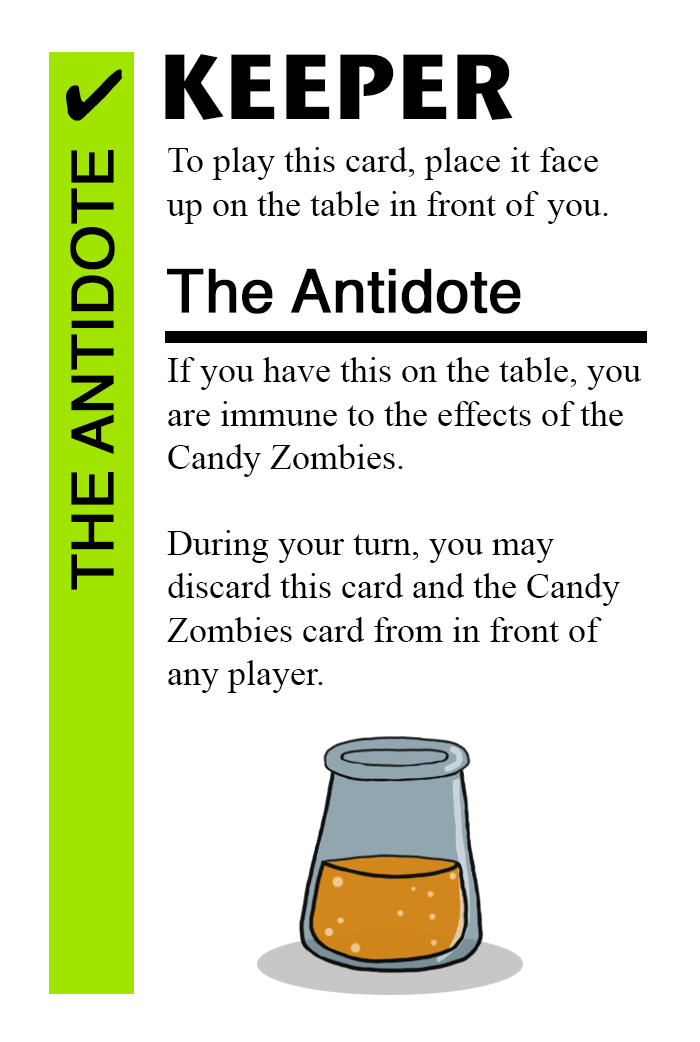
<style>
.page{position:relative;width:700px;height:1042px;background:#ffffff}
.page>*{position:absolute;margin:0}
.t1{font:92px "StoneSansITC-Bold";color:#000000}
.t2{font:72px "MS-Gothic";color:#000000}
.t3{font:58px "Helvetica";color:#000000;font-weight:bold}
.t4{font:36px "TimesNewRomanPSMT";color:#000000}
.t5{font:60px "Helvetica";color:#000000;font-weight:bold}
</style>
<div class="page">
<p class="t1" style="left:165px;top:54px;width:348px;height:66px">KEEPER</p>
<p class="t2" style="left:66px;top:69px;width:56px;height:52px">✔</p>
<p class="t3" style="left:70px;top:150px;width:45px;height:440px;rotate:-90deg">THE ANTIDOTE</p>
<p class="t4" style="left:167px;top:147px;width:441px;height:77px">To play this card, place it face<br>up on the table in front of you.</p>
<p class="t5" style="left:167px;top:268px;width:354px;height:46px">The Antidote</p>
<p class="t4" style="left:167px;top:357px;width:474px;height:336px">If you have this on the table, you <br>are immune to the effects of the <br>Candy Zombies. <br><br>During your turn, you may <br>discard this card and the Candy <br>Zombies card from in front of <br>any player.</p>
</div>
